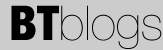
<style>
.page{position:relative;width:163px;height:50px;background:#cccccc}
.page>*{position:absolute;margin:0}
.t1{font:48px "HelveticaNeue-UltraLight";color:#000000}
.t2{font:48px "HelveticaNeue-CondensedBlack";color:#000000}
</style>
<div class="page">
<p class="t1" style="left:11px;top:5px;width:151px;height:44px"><span class="t2">BT</span>blogs</p>
</div>
